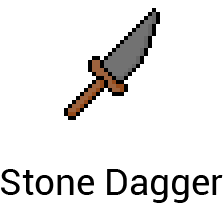
<style>
.page{position:relative;width:224px;height:203px;background:#ffffff}
.page>*{position:absolute;margin:0}
.t1{font:36.7px "Roboto-Regular";color:#000000}
</style>
<div class="page">
<p class="t1" style="left:1px;top:169px;width:222px;height:34px">Stone Dagger</p>
</div>
